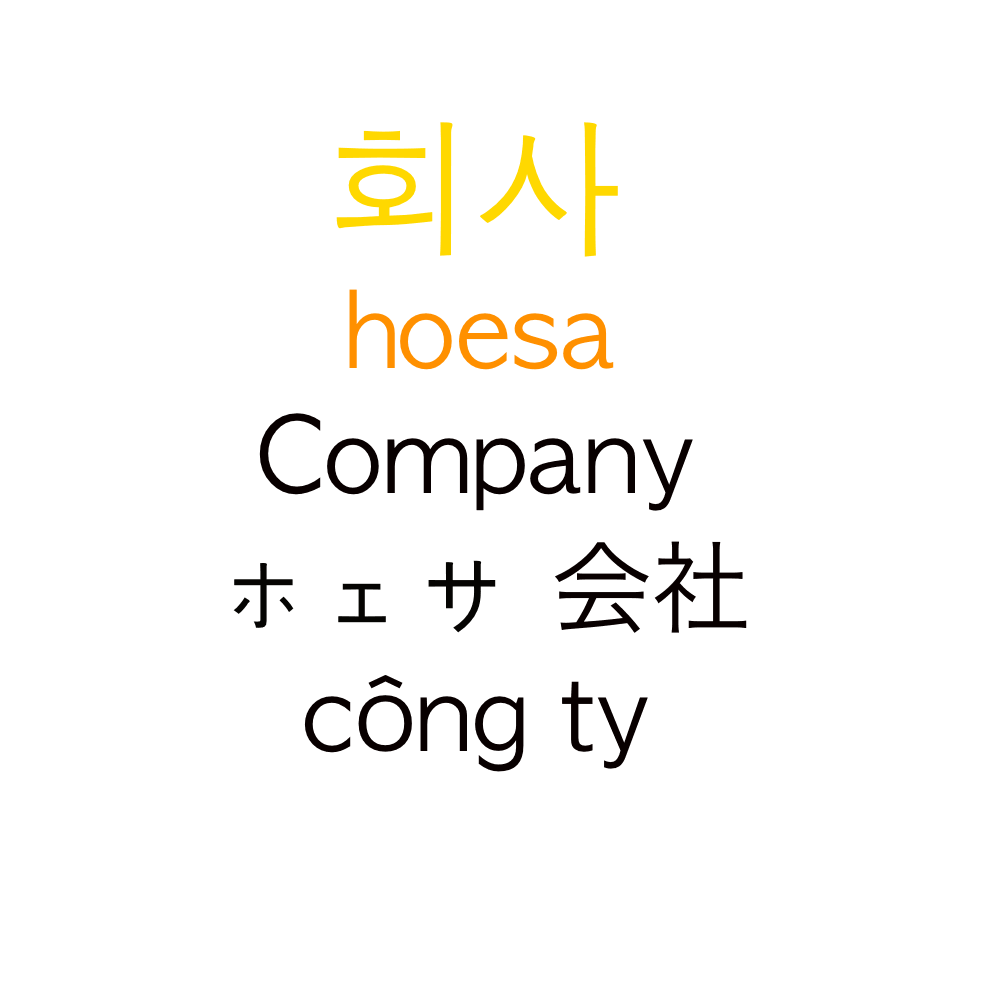
<style>
.page{position:relative;width:1000px;height:1000px;background:#ffffff}
.page>*{position:absolute;margin:0}
.t1{font:150px "AppleGothic";color:#ffd800}
.t2{font:100px "AppleGothic";color:#ff9000}
.t3{font:100px "AppleGothic";color:#080000}
.t4{font:100px "HiraKakuProN-W3";color:#080000}
.t5{font:100px "AppleGothic";color:#050402}
</style>
<div class="page">
<p class="t1" style="left:336px;top:122px;width:282px;height:135px">회사</p>
<p class="t2" style="left:349px;top:289px;width:265px;height:81px">hoesa</p>
<p class="t3" style="left:259px;top:413px;width:434px;height:98px">Company</p>
<p class="t4" style="left:555px;top:541px;width:192px;height:92px">会社</p>
<p class="t5" style="left:233px;top:560px;width:263px;height:73px"><span class="t1"><br>  </span>ホェサ</p>
<p class="t3" style="left:304px;top:675px;width:344px;height:97px">c<span class="t4">ô</span>ng ty</p>
</div>
